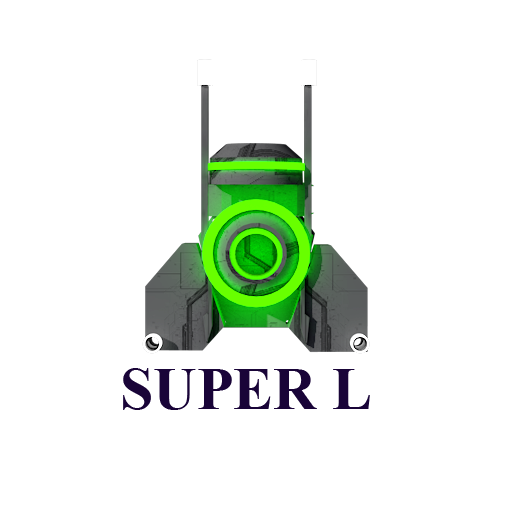
<style>
.page{position:relative;width:512px;height:512px;background:#ffffff}
.page>*{position:absolute;margin:0}
.t1{font:60px "TimesNewRomanPS-BoldMT";color:#190438}
</style>
<div class="page">
<p class="t1" style="left:123px;top:368px;width:247px;height:42px">SUPER L</p>
</div>
